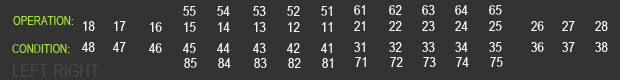
<style>
.page{position:relative;width:620px;height:80px;background:#333333}
.page>*{position:absolute;margin:0}
.t1{font:14px "ArialNarrowSpecialG1";color:#f8f8f2}
.t2{font:12px "ArialNarrowSpecialG1";color:#a6e22e}
.t3{font:18px "ArialNarrowSpecialG1";color:#464741}
</style>
<div class="page">
<p class="t1" style="left:183px;top:6px;width:13px;height:10px">55</p>
<p class="t1" style="left:217px;top:6px;width:13px;height:10px">54</p>
<p class="t1" style="left:253px;top:6px;width:13px;height:10px">53</p>
<p class="t1" style="left:287px;top:6px;width:13px;height:10px">52</p>
<p class="t1" style="left:321px;top:6px;width:11px;height:10px">51</p>
<p class="t1" style="left:354px;top:5px;width:11px;height:10px">61</p>
<p class="t1" style="left:389px;top:5px;width:13px;height:10px">62</p>
<p class="t1" style="left:422px;top:5px;width:13px;height:10px">63</p>
<p class="t1" style="left:455px;top:5px;width:13px;height:10px">64</p>
<p class="t1" style="left:489px;top:5px;width:13px;height:10px">65</p>
<p class="t2" style="left:13px;top:16px;width:60px;height:9px">OPERATION:</p>
<p class="t1" style="left:83px;top:21px;width:12px;height:10px">18</p>
<p class="t1" style="left:114px;top:21px;width:12px;height:10px">17</p>
<p class="t1" style="left:150px;top:22px;width:12px;height:10px">16</p>
<p class="t1" style="left:184px;top:22px;width:12px;height:10px">15</p>
<p class="t1" style="left:218px;top:22px;width:12px;height:10px">14</p>
<p class="t1" style="left:254px;top:22px;width:12px;height:10px">13</p>
<p class="t1" style="left:288px;top:22px;width:12px;height:10px">12</p>
<p class="t1" style="left:322px;top:22px;width:10px;height:10px">11</p>
<p class="t1" style="left:354px;top:21px;width:11px;height:10px">21</p>
<p class="t1" style="left:389px;top:21px;width:13px;height:10px">22</p>
<p class="t1" style="left:422px;top:21px;width:13px;height:10px">23</p>
<p class="t1" style="left:455px;top:21px;width:13px;height:10px">24</p>
<p class="t1" style="left:489px;top:21px;width:13px;height:10px">25</p>
<p class="t1" style="left:531px;top:21px;width:13px;height:10px">26</p>
<p class="t1" style="left:562px;top:21px;width:13px;height:10px">27</p>
<p class="t1" style="left:595px;top:21px;width:13px;height:10px">28</p>
<p class="t2" style="left:12px;top:44px;width:58px;height:9px">CONDITION:</p>
<p class="t1" style="left:82px;top:42px;width:13px;height:10px">48</p>
<p class="t1" style="left:113px;top:42px;width:13px;height:10px">47</p>
<p class="t1" style="left:149px;top:43px;width:13px;height:10px">46</p>
<p class="t1" style="left:183px;top:43px;width:13px;height:10px">45</p>
<p class="t1" style="left:217px;top:43px;width:13px;height:10px">44</p>
<p class="t1" style="left:253px;top:43px;width:13px;height:10px">43</p>
<p class="t1" style="left:287px;top:43px;width:13px;height:10px">42</p>
<p class="t1" style="left:321px;top:43px;width:11px;height:10px">41</p>
<p class="t1" style="left:354px;top:42px;width:11px;height:10px">31</p>
<p class="t1" style="left:389px;top:42px;width:13px;height:10px">32</p>
<p class="t1" style="left:422px;top:42px;width:13px;height:10px">33</p>
<p class="t1" style="left:455px;top:42px;width:13px;height:10px">34</p>
<p class="t1" style="left:489px;top:42px;width:13px;height:10px">35</p>
<p class="t1" style="left:531px;top:42px;width:13px;height:10px">36</p>
<p class="t1" style="left:562px;top:42px;width:13px;height:10px">37</p>
<p class="t1" style="left:595px;top:42px;width:13px;height:10px">38</p>
<p class="t3" style="left:12px;top:64px;width:36px;height:13px">LEFT</p>
<p class="t3" style="left:54px;top:64px;width:45px;height:13px">RIGHT</p>
<p class="t1" style="left:184px;top:58px;width:13px;height:10px">85</p>
<p class="t1" style="left:218px;top:58px;width:13px;height:10px">84</p>
<p class="t1" style="left:254px;top:58px;width:13px;height:10px">83</p>
<p class="t1" style="left:288px;top:58px;width:13px;height:10px">82</p>
<p class="t1" style="left:322px;top:58px;width:11px;height:10px">81</p>
<p class="t1" style="left:355px;top:57px;width:11px;height:10px">71</p>
<p class="t1" style="left:390px;top:57px;width:13px;height:10px">72</p>
<p class="t1" style="left:423px;top:57px;width:13px;height:10px">73</p>
<p class="t1" style="left:456px;top:57px;width:13px;height:10px">74</p>
<p class="t1" style="left:490px;top:57px;width:13px;height:10px">75</p>
</div>
